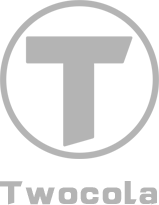
<style>
.page{position:relative;width:159px;height:205px;background:#ffffff}
.page>*{position:absolute;margin:0}
.t1{font:34px "JLinXin";color:#b4b4b4}
</style>
<div class="page">
<p class="t1" style="left:0px;top:181px;width:157px;height:24px">Twocola</p>
</div>
